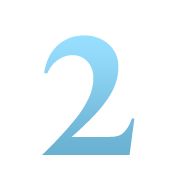
<style>
.page{position:relative;width:192px;height:192px;background:#ffffff}
.page>*{position:absolute;margin:0}
.t1{font:164.4px "PerpetuaTitlingMT-Bold";color:#7fc6e7}
</style>
<div class="page">
<p class="t1" style="left:42px;top:35px;width:93px;height:120px">2</p>
</div>
